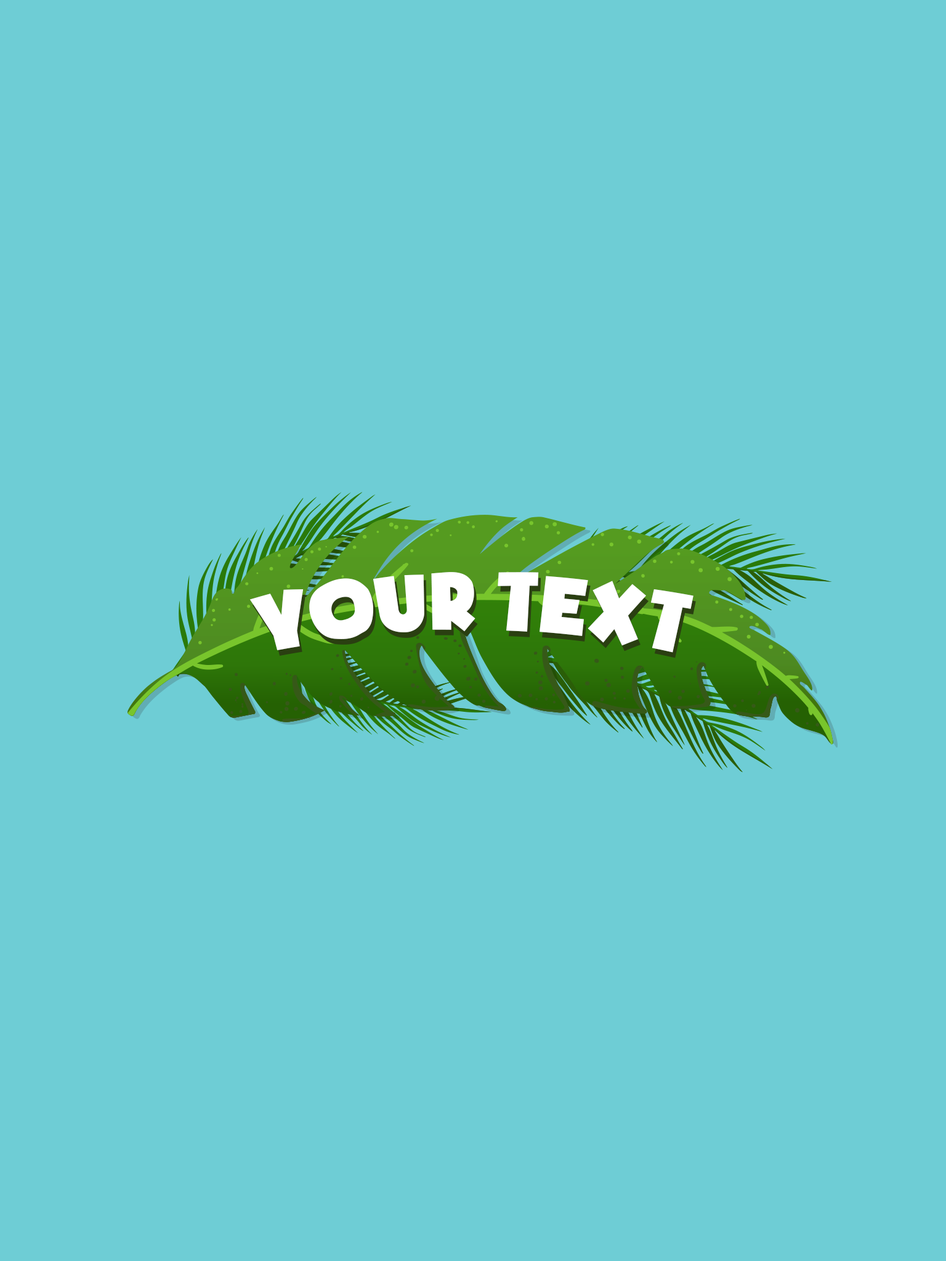
<style>
.page{position:relative;width:946px;height:1261px;background:#6ecdd5}
.page>*{position:absolute;margin:0}
.t1{font:92.4px "SoupofJustice";color:#ffffff}
</style>
<div class="page">
<p class="t1" style="left:249px;top:572px;width:444px;height:81px">YOUR TEXT</p>
</div>
